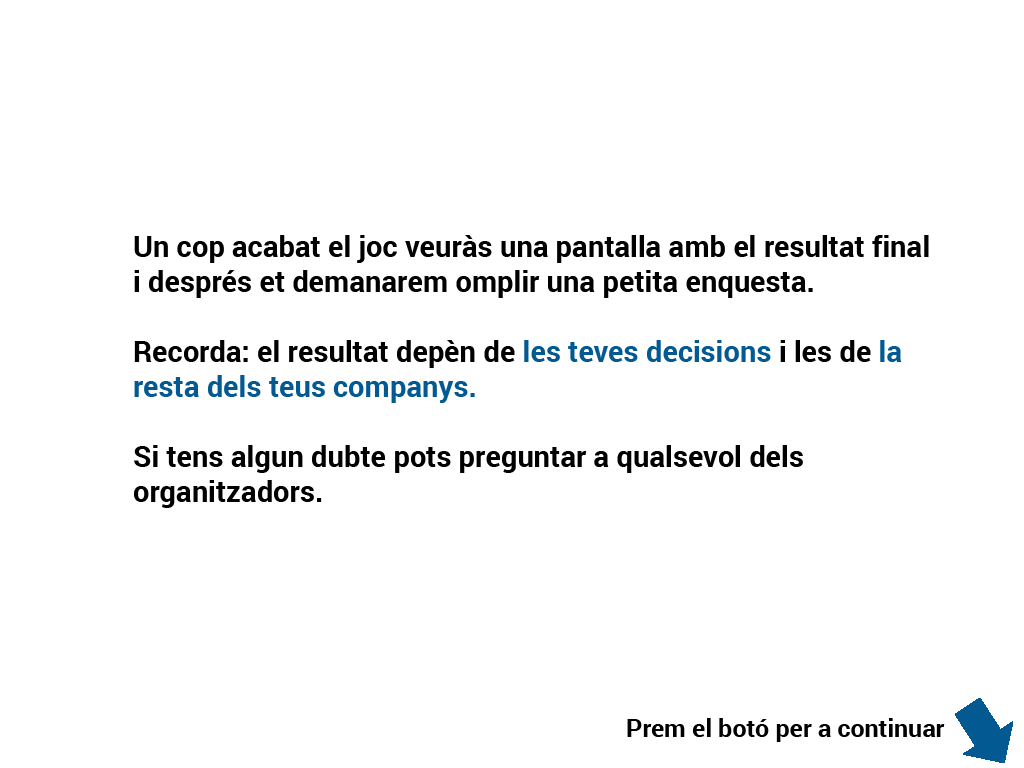
<style>
.page{position:relative;width:1024px;height:768px;background:#ffffff}
.page>*{position:absolute;margin:0}
.t1{font:29.2px "Roboto-Bold";color:#000000}
.t2{font:29.2px "Roboto-Bold";color:#035992}
.t3{font:25px "Roboto-Bold";color:#000000}
</style>
<div class="page">
<p class="t1" style="left:134px;top:235px;width:795px;height:273px">Un cop acabat el joc veuràs una pantalla amb el resultat final <br>i després et demanarem omplir una petita enquesta.<br><br>Recorda: el resultat depèn de <span class="t2">les teves decisions</span> i les de <span class="t2">la <br>resta dels teus companys.<br></span><br>Si tens algun dubte pots preguntar a qualsevol dels <br>organitzadors.</p>
<p class="t3" style="left:627px;top:718px;width:318px;height:24px">Prem el botó per a continuar</p>
</div>
